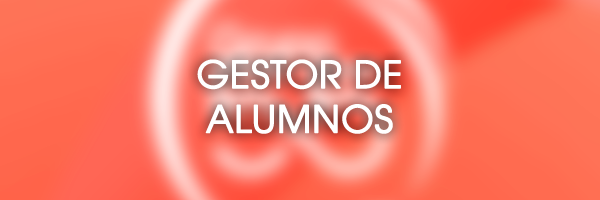
<style>
.page{position:relative;width:600px;height:200px}
.page>*{position:absolute;margin:0}
.t1{font:37.2px "TeXGyreAdventor-Regular";color:#ffffff;font-weight:bold}
</style>
<div class="page">
<p class="t1" style="left:197px;top:59px;width:204px;height:75px;text-align:center">GESTOR DE<br>ALUMNOS</p>
</div>
